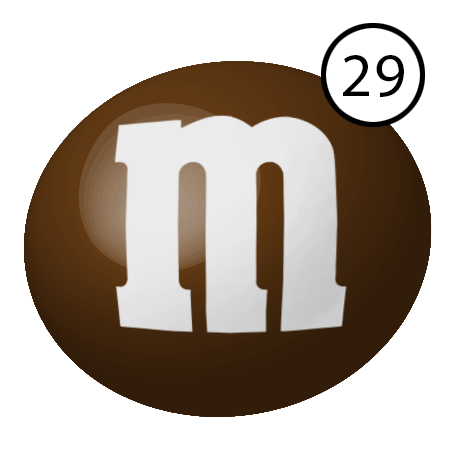
<style>
.page{position:relative;width:451px;height:451px;background:#ffffff}
.page>*{position:absolute;margin:0}
.t1{font:62.5px "MyriadPro-Regular";letter-spacing:0.02em;color:#000000}
</style>
<div class="page">
<p class="t1" style="left:343px;top:55px;width:61px;height:42px">29</p>
</div>
